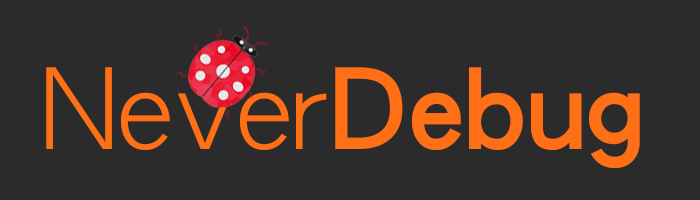
<style>
.page{position:relative;width:700px;height:200px;background:#2b2b2b}
.page>*{position:absolute;margin:0}
.t1{font:133.3px "DFPHeiW3";color:#ff6f16}
.t2{font:133.3px "DFPHeiW7";color:#ff6f16}
</style>
<div class="page">
<p class="t1" style="left:46px;top:67px;width:594px;height:101px">Never<span class="t2">Debug</span></p>
</div>
